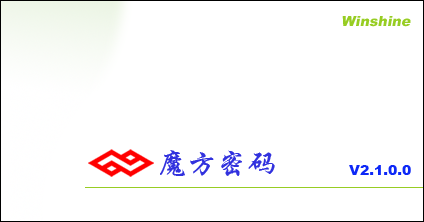
<style>
.page{position:relative;width:424px;height:222px;background:#ffffff}
.page>*{position:absolute;margin:0}
.t1{font:14px "Arial-Black";color:#97cd23;font-style:italic}
.t2{font:30px "STXingkai";color:#3131de}
.t3{font:14px "Arial-Black";color:#0d28f7}
</style>
<div class="page">
<p class="t1" style="left:342px;top:16px;width:69px;height:11px">Winshine</p>
<p class="t2" style="left:160px;top:150px;width:115px;height:26px">魔方密码</p>
<p class="t3" style="left:349px;top:165px;width:62px;height:10px">V2.1.0.0</p>
</div>
